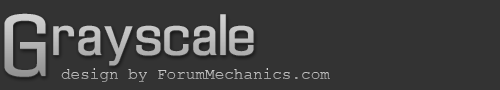
<style>
.page{position:relative;width:500px;height:90px;background:#333333}
.page>*{position:absolute;margin:0}
.t1{font:81.7px "Enigmatic-Regular"}
.t2{font:53px "Enigmatic-Regular";color:#bcbcbc}
.t3{font:16px "CourierNewPSMT";color:#b1b1b1}
</style>
<div class="page">
<p class="t1" style="left:4px;top:13px;width:42px;height:64px">G</p>
<p class="t2" style="left:53px;top:14px;width:201px;height:52px">rayscale</p>
<p class="t3" style="left:61px;top:68px;width:269px;height:14px">design by ForumMechanics.com</p>
</div>
